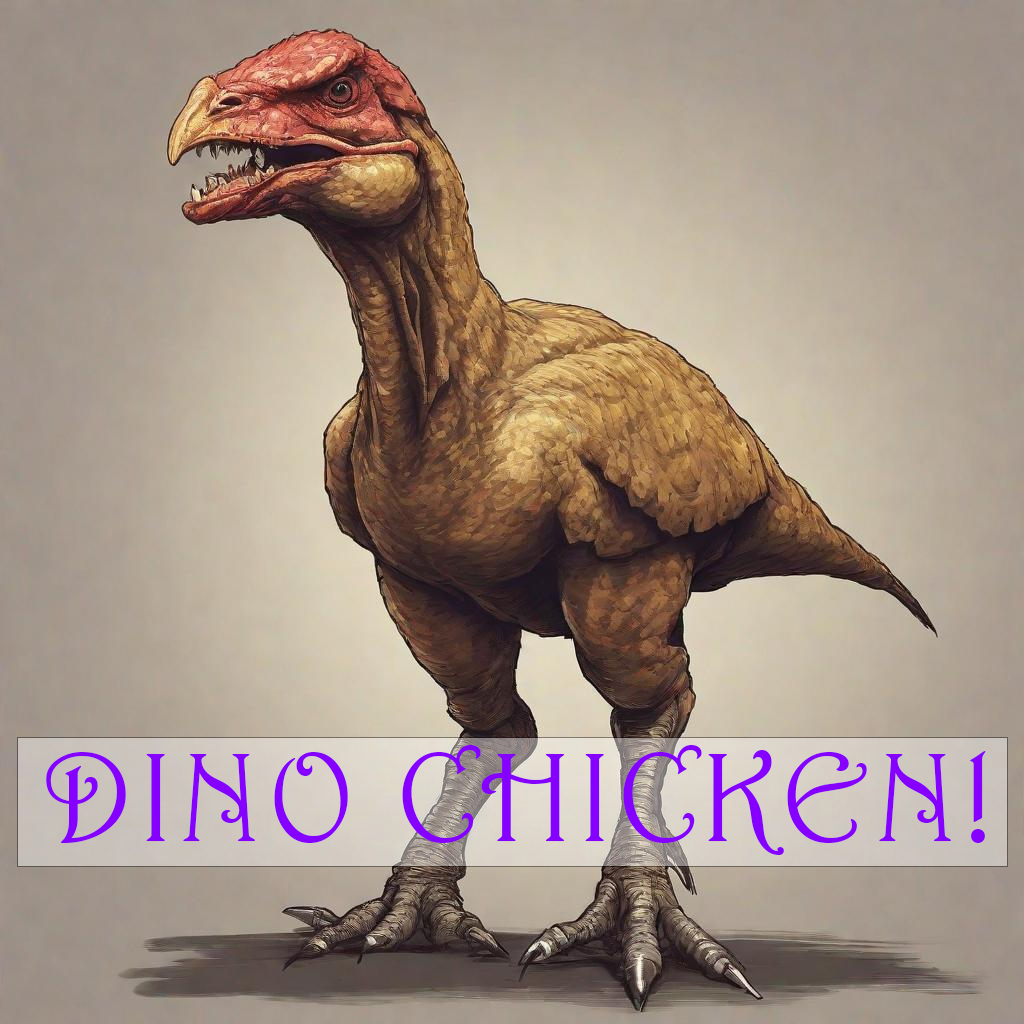
<style>
.page{position:relative;width:1024px;height:1024px}
.page>*{position:absolute;margin:0}
.t1{font:126.9px "Harrington";letter-spacing:0.05em;color:#8500ff}
</style>
<div class="page">
<p class="t1" style="left:46px;top:745px;width:940px;height:110px">DINO CHICKEN!</p>
</div>
